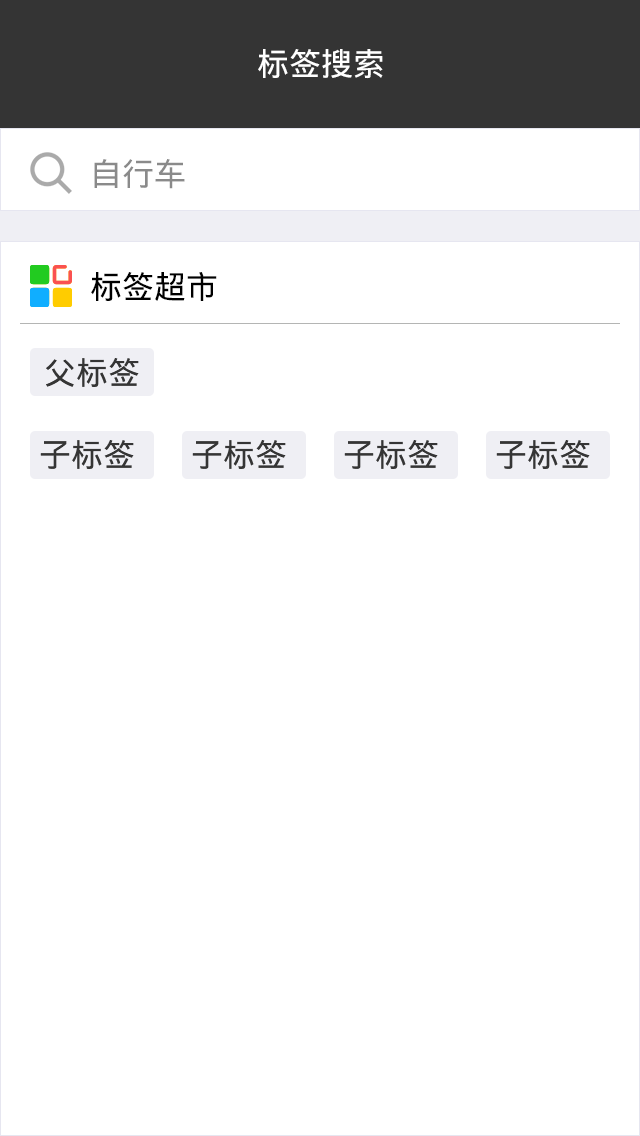
<style>
.page{position:relative;width:640px;height:1136px;background:#ffffff}
.page>*{position:absolute;margin:0}
.t1{font:32px "DroidSansFallback";color:#ffffff}
.t2{font:32px "DroidSansFallback";color:#8a8a8a}
.t3{font:32px "DroidSansFallback";color:#000000}
.t4{font:32px "DroidSansFallback";color:#353535}
</style>
<div class="page">
<p class="t1" style="left:258px;top:49px;width:125px;height:30px">标签搜索</p>
<p class="t2" style="left:94px;top:159px;width:91px;height:30px">自行车</p>
<p class="t3" style="left:91px;top:272px;width:126px;height:29px">标签超市</p>
<p class="t4" style="left:46px;top:358px;width:93px;height:29px">父标签</p>
<p class="t4" style="left:40px;top:440px;width:94px;height:29px">子标签</p>
<p class="t4" style="left:192px;top:440px;width:94px;height:29px">子标签</p>
<p class="t4" style="left:344px;top:440px;width:94px;height:29px">子标签</p>
<p class="t4" style="left:496px;top:440px;width:94px;height:29px">子标签</p>
</div>
